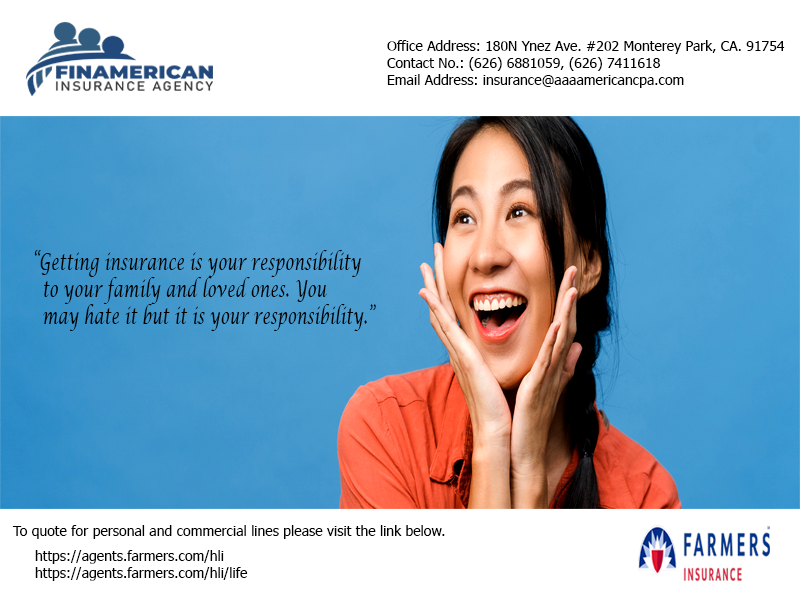
<style>
.page{position:relative;width:800px;height:600px;background:#ffffff}
.page>*{position:absolute;margin:0}
.t1{font:14px "Tahoma";color:#000000}
.t2{font:22.6px "LucidaCalligraphy-Italic";color:#000000;scale:0.68 1}
</style>
<div class="page">
<p class="t1" style="left:387px;top:40px;width:398px;height:48px;text-align:right">Office Address: 180N Ynez Ave. #202 Monterey Park, CA. 91754<br>Contact No.: (626) 6881059, (626) 7411618<br>Email Address: insurance@aaaamericancpa.com</p>
<p class="t2" style="left:34px;top:250px;width:342px;height:81px;text-align:right">“Getting insurance is your responsibility<br>  to your family and loved ones. You<br>  may hate it but it is your responsibility.”</p>
<p class="t1" style="left:12px;top:525px;width:433px;height:14px">To quote for personal and commercial lines please visit the link below.</p>
<p class="t1" style="left:35px;top:550px;width:213px;height:31px;text-align:right">https://agents.farmers.com/hli<br>https://agents.farmers.com/hli/life</p>
</div>
